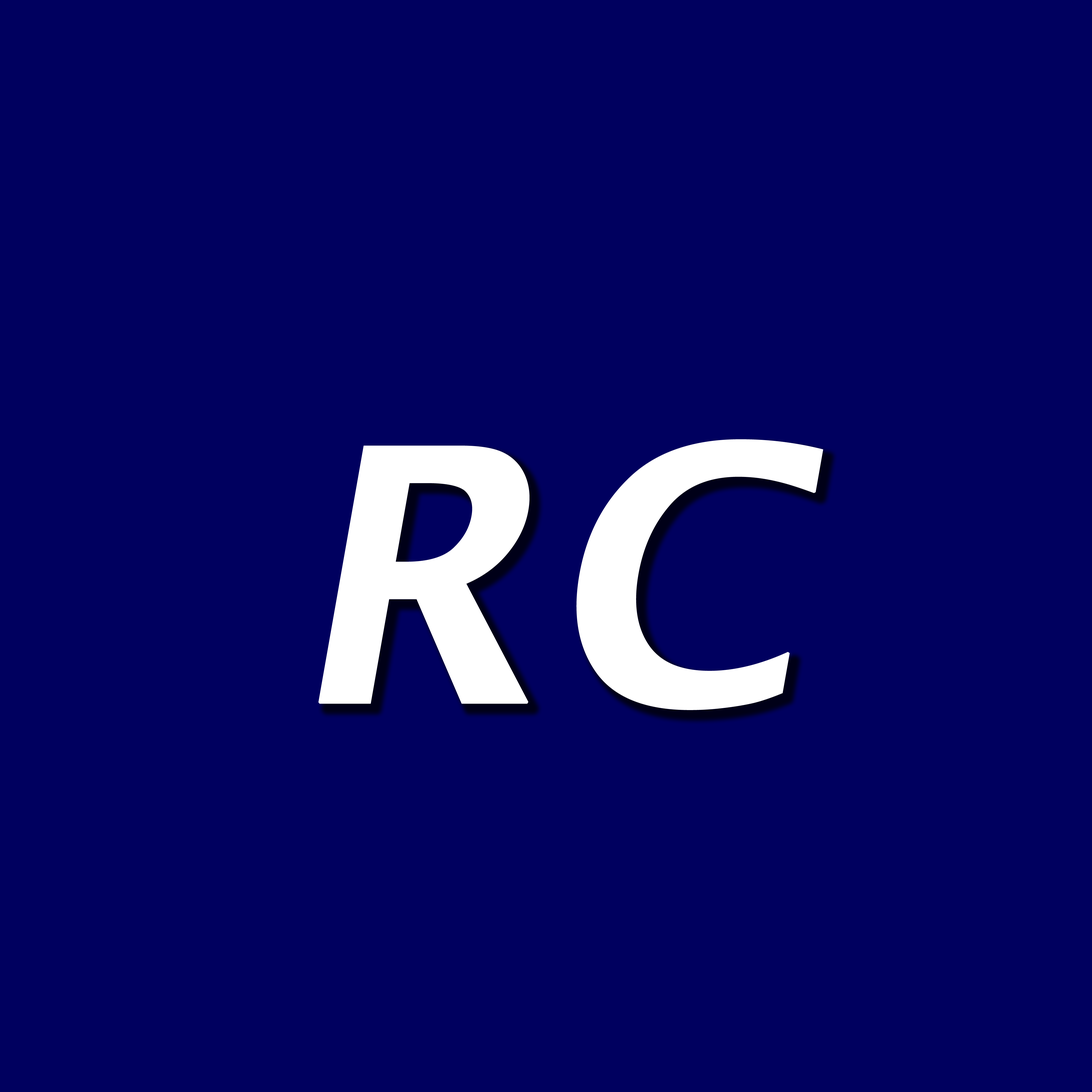
<style>
.page{position:relative;width:1092px;height:1092px;background:#00005f}
.page>*{position:absolute;margin:0}
.t1{font:353.8px "LucidaSans-Demi";color:#ffffff;font-weight:bold;font-style:italic}
</style>
<div class="page">
<p class="t1" style="left:318px;top:439px;width:505px;height:271px">RC</p>
</div>
